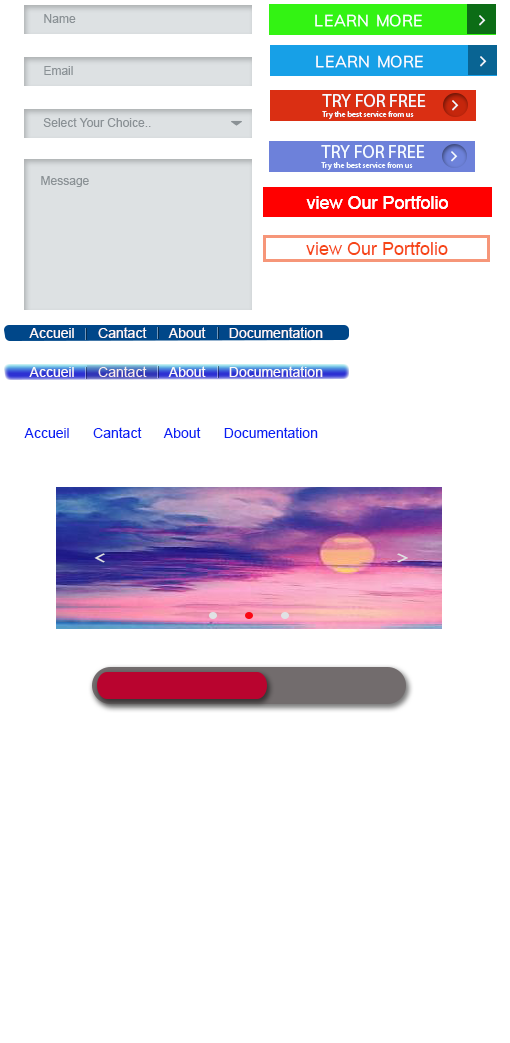
<style>
.page{position:relative;width:510px;height:1043px;background:#ffffff}
.page>*{position:absolute;margin:0}
.t1{font:12px "ArialMT";color:#8a9195}
.t2{font:14px "ArialNarrow";color:#8a9195}
.t3{font:8px "MyriadPro-Regular";color:#f5fbff}
.t4{font:18px "MyriadPro-Regular";color:#f5fbff}
.t5{font:18px "ArialMT";color:#ffffff}
.t6{font:18px "ArialMT";color:#f64617}
.t7{font:14px "ArialMT";color:#fdf7f7}
.t8{font:18px "ArialMT";color:#fdf7f7}
.t9{font:14px "ArialMT";color:#0a20f3}
.t10{font:18px "ArialMT";color:#0a20f3}
</style>
<div class="page">
<p class="t1" style="left:44px;top:14px;width:32px;height:9px"><span class="t2">  </span>  Name</p>
<p class="t1" style="left:44px;top:66px;width:29px;height:9px"><span class="t2">   </span> Email</p>
<p class="t3" style="left:322px;top:94px;width:104px;height:25px"><span class="t4">TRY FOR FREE<br></span>Try the best service from us</p>
<p class="t1" style="left:43px;top:118px;width:108px;height:9px"><span class="t2">    </span>Select Your Choice..</p>
<p class="t3" style="left:321px;top:145px;width:104px;height:25px"><span class="t4">TRY FOR FREE<br></span>Try the best service from us</p>
<p class="t1" style="left:41px;top:176px;width:48px;height:11px"><span class="t2">  </span>  Message</p>
<p class="t5" style="left:306px;top:196px;width:142px;height:13px">view Our Portfolio</p>
<p class="t5" style="left:306px;top:196px;width:142px;height:13px">view Our Portfolio</p>
<p class="t6" style="left:306px;top:242px;width:142px;height:13px">view Our Portfolio</p>
<p class="t7" style="left:29px;top:327px;width:294px;height:11px"><span class="t8"> </span>Accueil      Cantact      About      Documentation</p>
<p class="t7" style="left:29px;top:366px;width:294px;height:11px"><span class="t8"> </span>Accueil      Cantact      About      Documentation</p>
<p class="t9" style="left:24px;top:427px;width:294px;height:11px"><span class="t10"> </span>Accueil      Cantact      About      Documentation</p>
</div>
